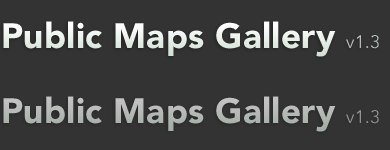
<style>
.page{position:relative;width:390px;height:150px;background:#333333}
.page>*{position:absolute;margin:0}
.t1{font:35px "AvenirLTStd-Black";letter-spacing:0.01em;color:#ffffff}
.t2{font:18px "AvenirLTStd-Book";letter-spacing:0.01em;color:#cccccc}
.t3{font:35px "AvenirLTStd-Black";letter-spacing:0.01em;color:#b4b9b4}
.t4{font:18px "AvenirLTStd-Book";letter-spacing:0.01em;color:#b4b9b4}
</style>
<div class="page">
<p class="t1" style="left:3px;top:21px;width:376px;height:36px">Public Maps Gallery <span class="t2">v1.3</span></p>
<p class="t3" style="left:3px;top:96px;width:376px;height:36px">Public Maps Gallery <span class="t4">v1.3</span></p>
</div>
